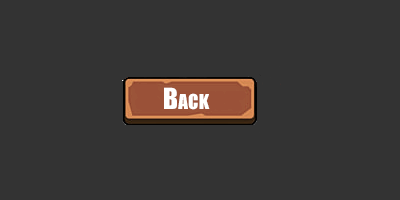
<style>
.page{position:relative;width:400px;height:200px;background:#333333}
.page>*{position:absolute;margin:0}
.t1{font:27px "Impact";letter-spacing:0.01em;color:#ffffff;font-variant:small-caps}
</style>
<div class="page">
<p class="t1" style="left:164px;top:87px;width:46px;height:23px">Back</p>
</div>
